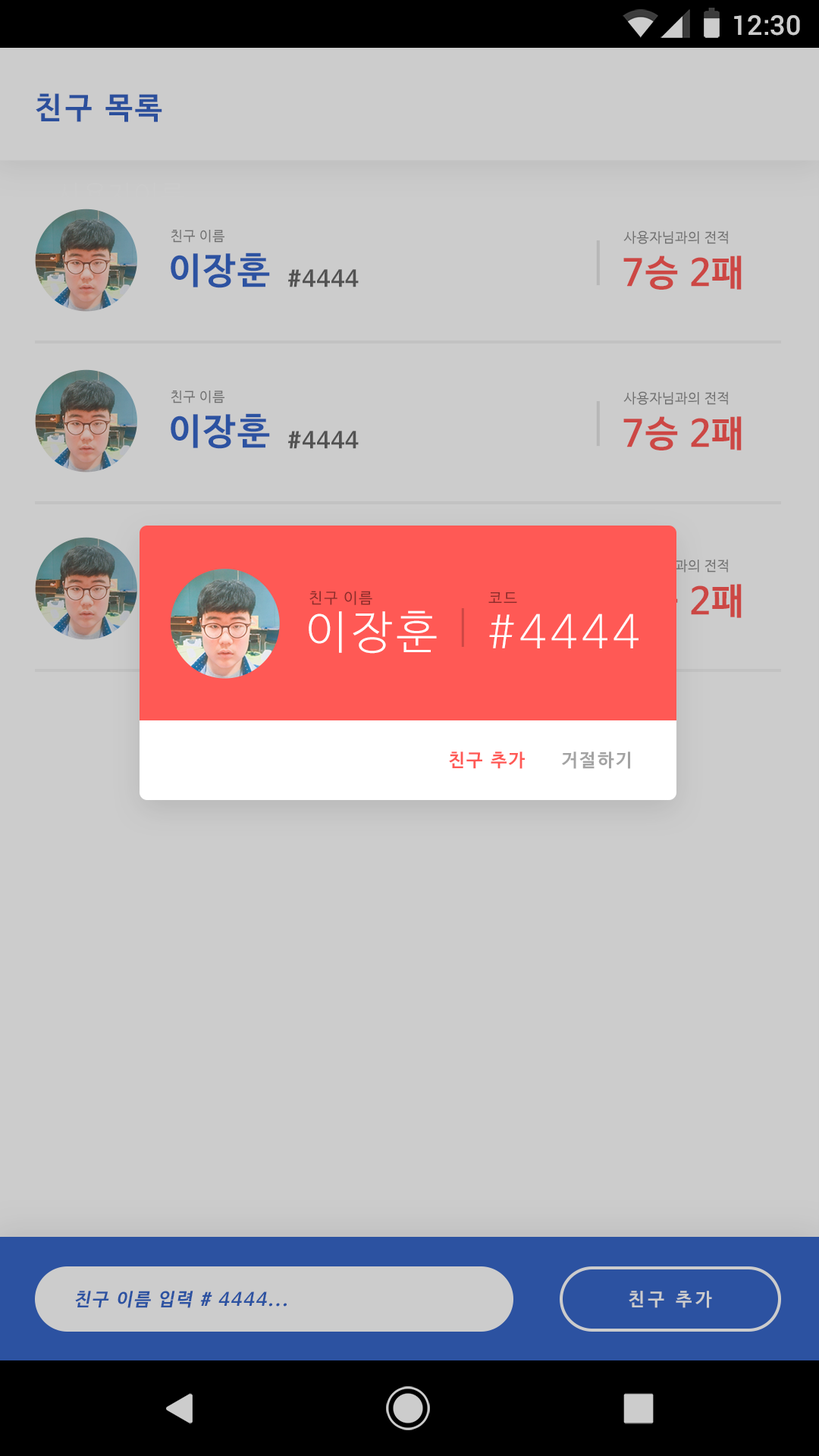
<style>
.page{position:relative;width:819px;height:1456px;background:#cccccc}
.page>*{position:absolute;margin:0}
.t1{font:27.3px "Roboto-Medium"}
.t2{font:30.3px "NanumBarunGothicBold";letter-spacing:0.1em;color:#2b4f9c}
.t3{font:15.2px "NanumBarunGothic";letter-spacing:0.1em;color:#8d2d2b}
.t4{font:45.5px "NanumBarunGothicLight";letter-spacing:0.1em;color:#fefefe}
.t5{font:18.2px "NanumBarunGothicBold";letter-spacing:0.1em;color:#ff5955}
.t6{font:18.2px "NanumBarunGothicBold";letter-spacing:0.1em;color:#a3a3a3}
.t7{font:18.2px "NanumBarunGothicBold";letter-spacing:0.1em;color:#2c52a1}
.t8{font:18.2px "NanumBarunGothicBold";letter-spacing:0.2em}
</style>
<div class="page">
<p class="t1" style="left:736px;top:15px;width:66px;height:21px">12:30</p>
<p class="t2" style="left:37px;top:93px;width:127px;height:29px">친구 목록</p>
<p class="t3" style="left:309px;top:591px;width:63px;height:14px">친구 이름</p>
<p class="t3" style="left:488px;top:592px;width:29px;height:11px">코드</p>
<p class="t4" style="left:309px;top:610px;width:128px;height:44px">이장훈</p>
<p class="t4" style="left:489px;top:613px;width:150px;height:35px">#4444</p>
<p class="t5" style="left:449px;top:751px;width:76px;height:18px">친구 추가</p>
<p class="t6" style="left:562px;top:751px;width:68px;height:18px">거절하기</p>
<p class="t7" style="left:76px;top:1291px;width:192px;height:17px">친구 이름 입력 # 4444</p>
<p class="t8" style="left:630px;top:1291px;width:84px;height:17px">친구 추가</p>
</div>
